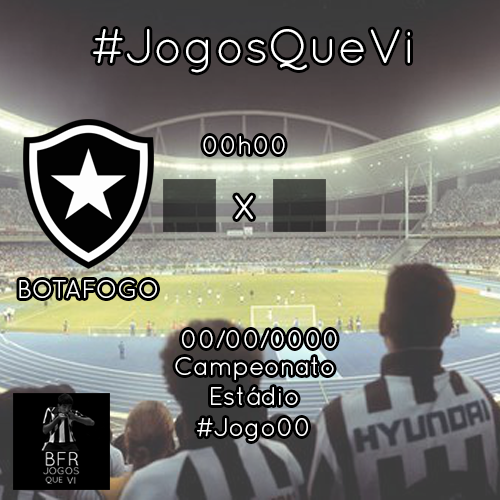
<style>
.page{position:relative;width:500px;height:500px}
.page>*{position:absolute;margin:0}
.t1{font:48px "QuicksandBook-Regular";color:#ffffff}
.t2{font:25px "QuicksandBook-Regular";color:#ffffff}
</style>
<div class="page">
<p class="t1" style="left:93px;top:29px;width:317px;height:44px">#JogosQueVi</p>
<p class="t2" style="left:203px;top:136px;width:82px;height:18px">00h00</p>
<p class="t1" style="left:235px;top:195px;width:18px;height:24px">x</p>
<p class="t2" style="left:19px;top:280px;width:138px;height:18px">BOTAFOGO</p>
<p class="t2" style="left:182px;top:330px;width:155px;height:18px">00/00/0000</p>
<p class="t2" style="left:175px;top:357px;width:159px;height:23px">Campeonato</p>
<p class="t2" style="left:211px;top:387px;width:87px;height:18px">Estádio</p>
<p class="t2" style="left:197px;top:418px;width:111px;height:23px">#Jogo00</p>
</div>
